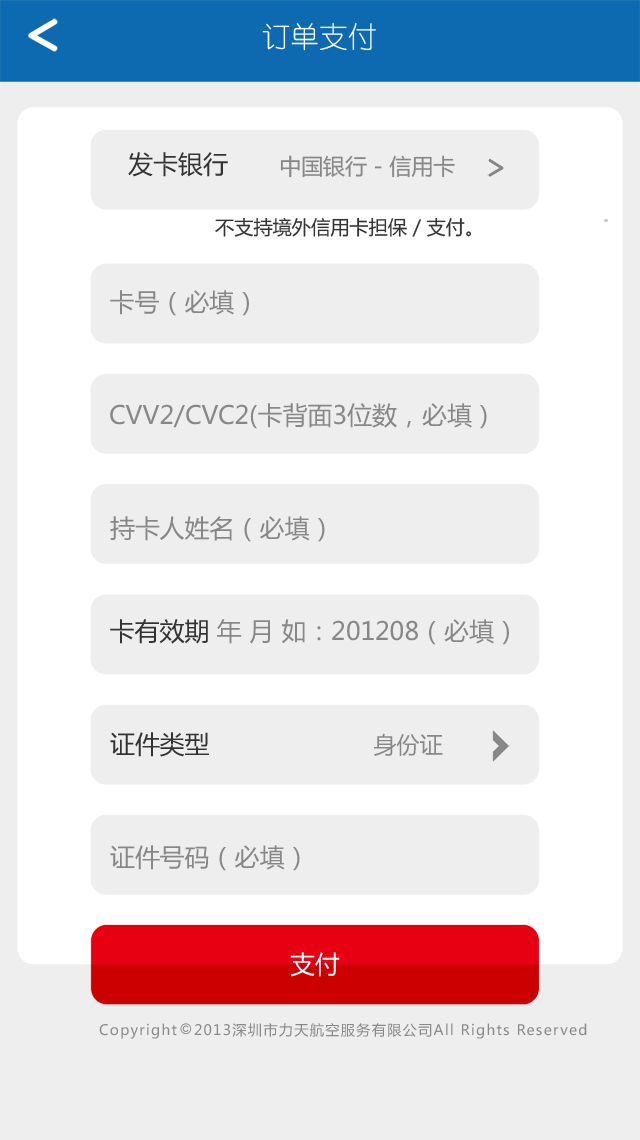
<style>
.page{position:relative;width:640px;height:1140px;background:#eeeeee}
.page>*{position:absolute;margin:0}
.t1{font:28.8px "YouYuan";color:#ffffff}
.t2{font:24.9px "MicrosoftYaHei";color:#333333}
.t3{font:21.9px "MicrosoftYaHei";color:#878787}
.t4{font:19.2px "MicrosoftYaHei";color:#333333}
.t5{font:24.9px "MicrosoftYaHei";color:#878787}
.t6{font:23px "MicrosoftYaHei";color:#878787}
.t7{font:24.9px "MicrosoftYaHei";color:#fefefe}
.t8{font:14.2px "MicrosoftYaHei";letter-spacing:0.09em;color:#898989}
</style>
<div class="page">
<p class="t1" style="left:262px;top:23px;width:114px;height:28px">订单支付</p>
<p class="t2" style="left:128px;top:152px;width:100px;height:25px">发卡银行</p>
<p class="t3" style="left:280px;top:155px;width:175px;height:23px">中国银行 - 信用卡</p>
<p class="t4" style="left:215px;top:217px;width:256px;height:20px">不支持境外信用卡担保 / 支付。</p>
<p class="t5" style="left:110px;top:290px;width:139px;height:26px">卡号（必填）</p>
<p class="t5" style="left:110px;top:403px;width:377px;height:26px">CVV2/CVC2(卡背面3位数，必填）</p>
<p class="t5" style="left:110px;top:516px;width:215px;height:26px">持卡人姓名（必填）</p>
<p class="t5" style="left:110px;top:619px;width:399px;height:26px"><span class="t2">卡有效期</span> 年 月 如：201208（必填）</p>
<p class="t2" style="left:110px;top:732px;width:99px;height:25px">证件类型</p>
<p class="t6" style="left:374px;top:733px;width:69px;height:23px">身份证</p>
<p class="t5" style="left:110px;top:845px;width:190px;height:26px">证件号码（必填）</p>
<p class="t7" style="left:290px;top:952px;width:50px;height:25px">支付</p>
<p class="t8" style="left:99px;top:1023px;width:78px;height:16px">Copyright</p>
<p class="t8" style="left:194px;top:1023px;width:393px;height:16px">2013深圳市力天航空服务有限公司All Rights Reserved</p>
</div>
